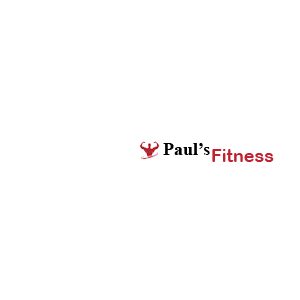
<style>
.page{position:relative;width:300px;height:300px;background:#ffffff}
.page>*{position:absolute;margin:0}
.t1{font:18px "TimesNewRomanPS-BoldMT";color:#000000}
.t2{font:18px "ArialRoundedMTBold";color:#c02231}
</style>
<div class="page">
<p class="t1" style="left:163px;top:143px;width:47px;height:12px">Paul’s</p>
<p class="t2" style="left:212px;top:149px;width:62px;height:13px">Fitness</p>
</div>
